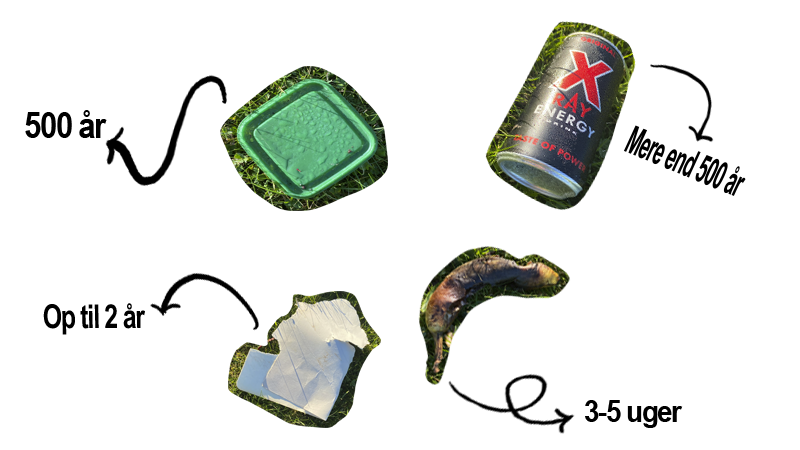
<style>
.page{position:relative;width:800px;height:450px;background:#ffffff}
.page>*{position:absolute;margin:0}
.t1{font:36.8px "ArialNarrow-Bold";letter-spacing:-0.04em;color:#000000;scale:1.03 1}
.t2{font:32.9px "ArialNarrow-Bold";letter-spacing:-0.04em;color:#000000;scale:0.92 1}
.t3{font:31.4px "ArialNarrow-Bold";letter-spacing:-0.04em;color:#000000;scale:1.07 1}
</style>
<div class="page">
<p class="t1" style="left:25px;top:110px;width:82px;height:28px">500 år</p>
<p class="t2" style="left:43px;top:303px;width:102px;height:32px">Op til 2 år</p>
<p class="t3" style="left:585px;top:400px;width:98px;height:28px">3-5 uger</p>
</div>
